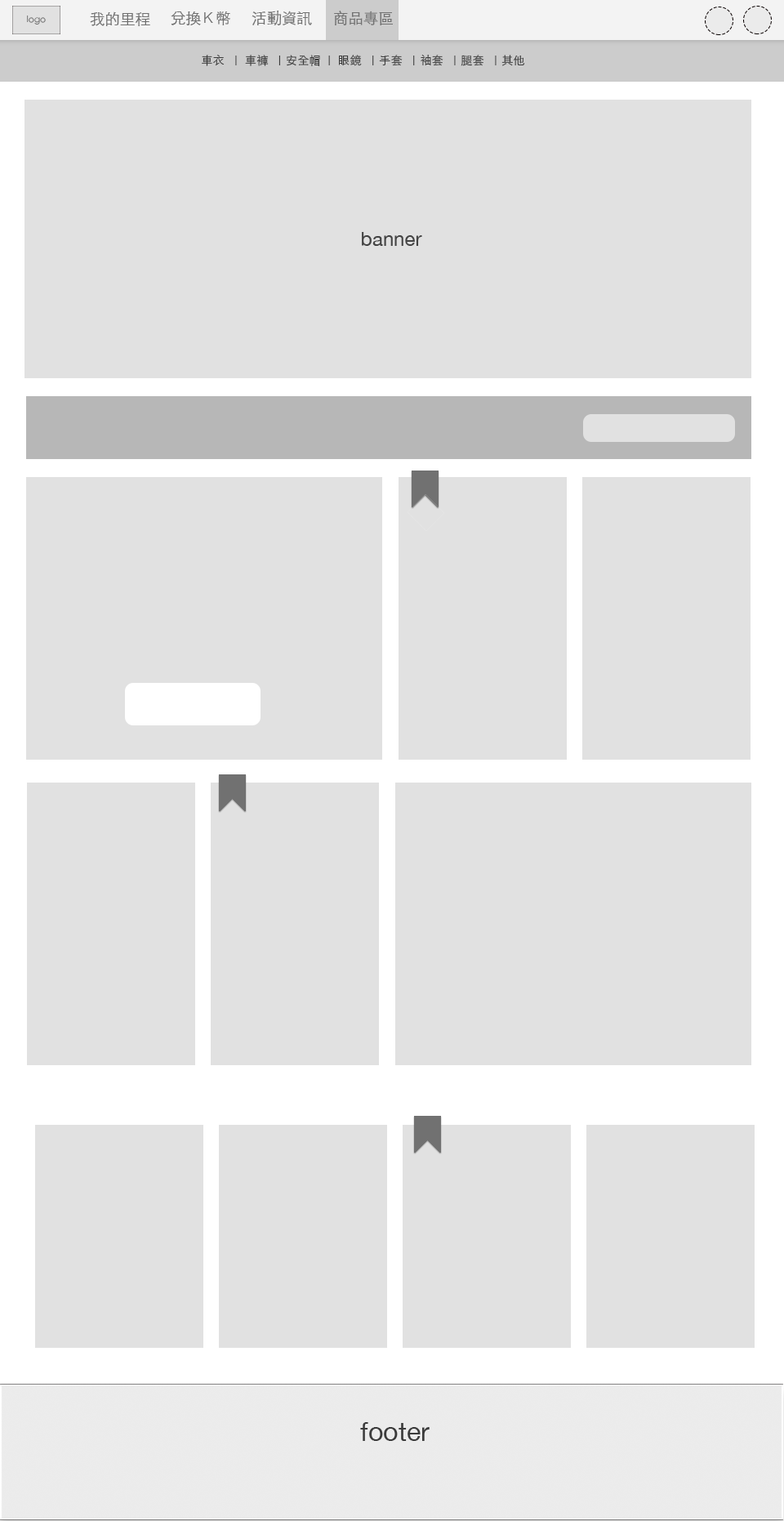
<style>
.page{position:relative;width:784px;height:1521px;background:#e1e1e1}
.page>*{position:absolute;margin:0}
.t1{font:8.7px "STHeitiTC-Light";color:#717171}
.t2{font:15.1px "STHeitiTC-Light";color:#717171}
.t3{font:11.7px "STHeitiTC-Light";color:#3b3b3b}
.t4{font:19.6px "HelveticaNeue";color:#434343}
.t5{font:26.4px "HelveticaNeue";color:#3b3b3b}
</style>
<div class="page">
<p class="t1" style="left:27px;top:16px;width:19px;height:9px">logo</p>
<p class="t2" style="left:90px;top:11px;width:60px;height:15px">我的里程</p>
<p class="t2" style="left:171px;top:11px;width:59px;height:14px">兌換Ｋ幣</p>
<p class="t2" style="left:252px;top:11px;width:60px;height:14px">活動資訊</p>
<p class="t2" style="left:334px;top:11px;width:59px;height:14px">商品專區</p>
<p class="t3" style="left:202px;top:55px;width:323px;height:11px">車衣  ｜ 車褲  ｜安全帽 ｜ 眼鏡  ｜手套  ｜袖套  ｜腿套  ｜其他</p>
<p class="t4" style="left:362px;top:232px;width:60px;height:14px">banner</p>
<p class="t5" style="left:360px;top:1422px;width:70px;height:19px">footer</p>
</div>
